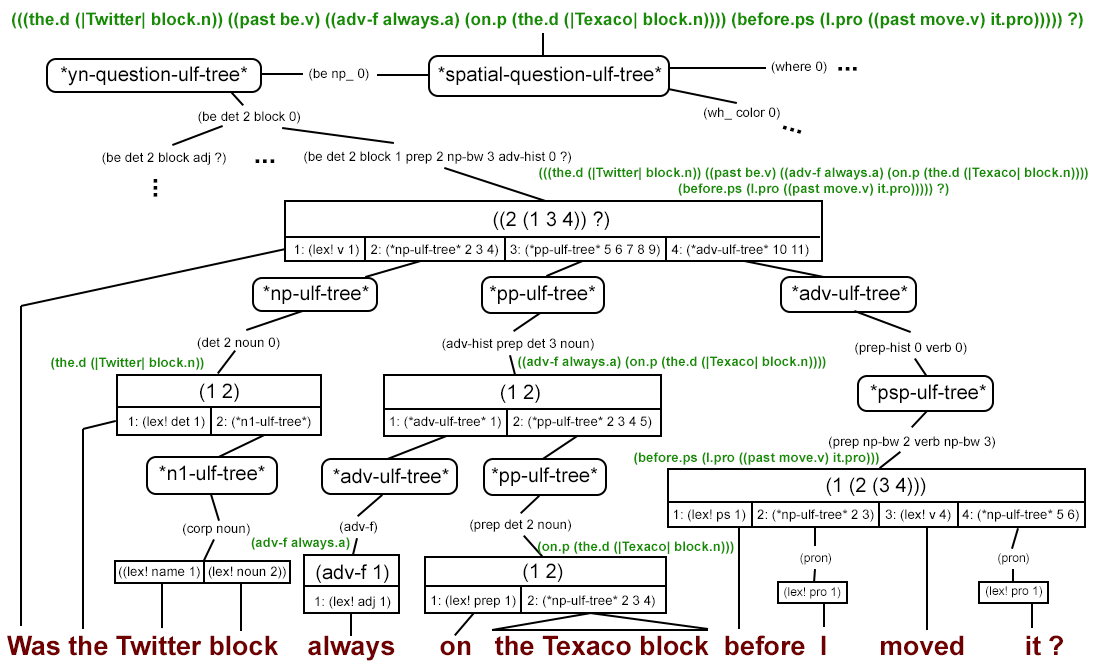
<style>
.page{position:relative;width:1100px;height:666px;background:#ffffff}
.page>*{position:absolute;margin:0}
.t1{font:17.3px "Arial-BoldMT";color:#148e00}
.t2{font:13.3px "ArialMT";color:#000000}
.t3{font:20px "ArialMT";color:#000000}
.t4{font:26.7px "Arial-BoldMT";color:#000000}
.t5{font:13.3px "Arial-BoldMT";color:#148e00}
.t6{font:12px "ArialMT";color:#000000}
.t7{font:26.7px "Arial-BoldMT";color:#700000}
</style>
<div class="page">
<p class="t1" style="left:12px;top:12px;width:1071px;height:17px">(((the.d (|Twitter| block.n)) ((past be.v) ((adv-f always.a) (on.p (the.d (|Texaco| block.n)))) (before.ps (I.pro ((past move.v) it.pro))))) ?)</p>
<p class="t2" style="left:771px;top:61px;width:56px;height:13px">(where 0)</p>
<p class="t3" style="left:60px;top:66px;width:188px;height:20px">*yn-question-ulf-tree*</p>
<p class="t2" style="left:309px;top:68px;width:60px;height:13px">(be np_ 0)</p>
<p class="t3" style="left:438px;top:66px;width:224px;height:19px">*spatial-question-ulf-tree*</p>
<p class="t4" style="left:838px;top:67px;width:19px;height:4px;rotate:180deg">...</p>
<p class="t2" style="left:198px;top:111px;width:102px;height:13px">(be det 2 block 0)</p>
<p class="t2" style="left:704px;top:107px;width:76px;height:13px">(wh_ color 0)</p>
<p class="t4" style="left:782px;top:125px;width:20px;height:9px;rotate:-163deg">...</p>
<p class="t2" style="left:102px;top:152px;width:124px;height:13px">(be det 2 block adj ?)</p>
<p class="t4" style="left:255px;top:159px;width:20px;height:4px">...</p>
<p class="t2" style="left:304px;top:151px;width:267px;height:13px">(be det 2 block 1 prep 2 np-bw 3 adv-hist 0 ?)</p>
<p class="t5" style="left:539px;top:167px;width:549px;height:29px;text-align:center">(((the.d (|Twitter| block.n)) ((past be.v) ((adv-f always.a) (on.p (the.d (|Texaco| block.n)))) (before.ps (I.pro ((past move.v) it.pro))))) ?)</p>
<p class="t4" style="left:153px;top:179px;width:5px;height:18px;rotate:90deg">...</p>
<p class="t2" style="left:295px;top:211px;width:514px;height:46px;text-align:center"><span class="t3">((2 (1 3 4)) ?)<br><br></span>1: (lex! v 1)   2: (*np-ulf-tree* 2 3 4)   3: (*pp-ulf-tree* 5 6 7 8 9)   4: (*adv-ulf-tree* 10 11)</p>
<p class="t3" style="left:263px;top:285px;width:106px;height:19px">*np-ulf-tree*</p>
<p class="t3" style="left:489px;top:285px;width:107px;height:19px">*pp-ulf-tree*</p>
<p class="t3" style="left:792px;top:285px;width:116px;height:16px">*adv-ulf-tree*</p>
<p class="t2" style="left:197px;top:337px;width:83px;height:13px">(det 2 noun 0)</p>
<p class="t2" style="left:442px;top:338px;width:152px;height:13px">(adv-hist prep det 3 noun)</p>
<p class="t2" style="left:855px;top:342px;width:112px;height:13px">(prep-hist 0 verb 0)</p>
<p class="t5" style="left:51px;top:357px;width:153px;height:13px">(the.d (|Twitter| block.n))</p>
<p class="t5" style="left:518px;top:356px;width:308px;height:13px">((adv-f always.a) (on.p (the.d (|Texaco| block.n))))</p>
<p class="t2" style="left:129px;top:383px;width:182px;height:46px;text-align:center"><span class="t3">(1 2)<br><br></span>1: (lex! det 1)   2: (*n1-ulf-tree*)</p>
<p class="t2" style="left:390px;top:384px;width:262px;height:45px;text-align:center"><span class="t3">(1 2)<br><br></span>1: (*adv-ulf-tree* 1)   2: (*pp-ulf-tree* 2 3 4 5)</p>
<p class="t3" style="left:870px;top:384px;width:116px;height:19px">*psp-ulf-tree*</p>
<p class="t2" style="left:829px;top:436px;width:166px;height:13px">(prep np-bw 2 verb np-bw 3)</p>
<p class="t5" style="left:634px;top:452px;width:245px;height:13px">(before.ps (I.pro ((past move.v) it.pro)))</p>
<p class="t3" style="left:159px;top:465px;width:106px;height:16px">*n1-ulf-tree*</p>
<p class="t3" style="left:333px;top:468px;width:116px;height:16px">*adv-ulf-tree*</p>
<p class="t3" style="left:491px;top:467px;width:107px;height:19px">*pp-ulf-tree*</p>
<p class="t2" style="left:674px;top:477px;width:405px;height:45px;text-align:center"><span class="t3">(1 (2 (3 4)))<br><br></span>1: (lex! ps 1)   2: (*np-ulf-tree* 2 3)   3: (lex! v 4)   4: (*np-ulf-tree* 5 6)</p>
<p class="t2" style="left:340px;top:521px;width:37px;height:13px">(adv-f)</p>
<p class="t2" style="left:470px;top:519px;width:101px;height:13px">(prep det 2 noun)</p>
<p class="t2" style="left:183px;top:523px;width:67px;height:13px">(corp noun)</p>
<p class="t5" style="left:251px;top:537px;width:99px;height:13px">(adv-f always.a)</p>
<p class="t5" style="left:538px;top:541px;width:196px;height:13px">(on.p (the.d (|Texaco| block.n)))</p>
<p class="t6" style="left:800px;top:553px;width:31px;height:12px">(pron)</p>
<p class="t6" style="left:998px;top:553px;width:31px;height:12px">(pron)</p>
<p class="t2" style="left:119px;top:566px;width:167px;height:13px">((lex! name 1)  (lex! noun 2))</p>
<p class="t2" style="left:315px;top:564px;width:76px;height:45px;text-align:center"><span class="t3">(adv-f 1)<br><br></span>1: (lex! adj 1)</p>
<p class="t2" style="left:431px;top:563px;width:224px;height:45px;text-align:center"><span class="t3">(1 2)<br><br></span>1: (lex! prep 1)   2: (*np-ulf-tree* 2 3 4)</p>
<p class="t6" style="left:784px;top:587px;width:57px;height:12px">(lex! pro 1)</p>
<p class="t6" style="left:986px;top:586px;width:56px;height:12px">(lex! pro 1)</p>
<p class="t7" style="left:7px;top:635px;width:1056px;height:26px">Was the Twitter block    always      on   the Texaco block  before  I       moved        it ?</p>
</div>
